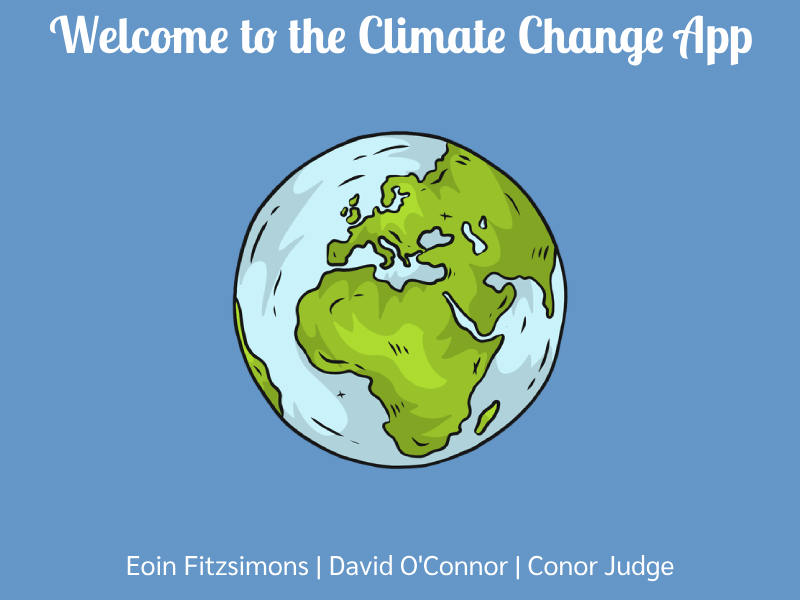
<style>
.page{position:relative;width:800px;height:600px;background:#6496c8}
.page>*{position:absolute;margin:0}
.t1{font:50px "LobsterTwo-Bold";color:#ffffff}
.t2{font:27px "Sarabun-Regular";color:#ffffff}
</style>
<div class="page">
<p class="t1" style="left:49px;top:15px;width:703px;height:51px">Welcome to the Climate Change App</p>
<p class="t2" style="left:127px;top:554px;width:547px;height:28px">Eoin Fitzsimons | David O'Connor | Conor Judge</p>
</div>
